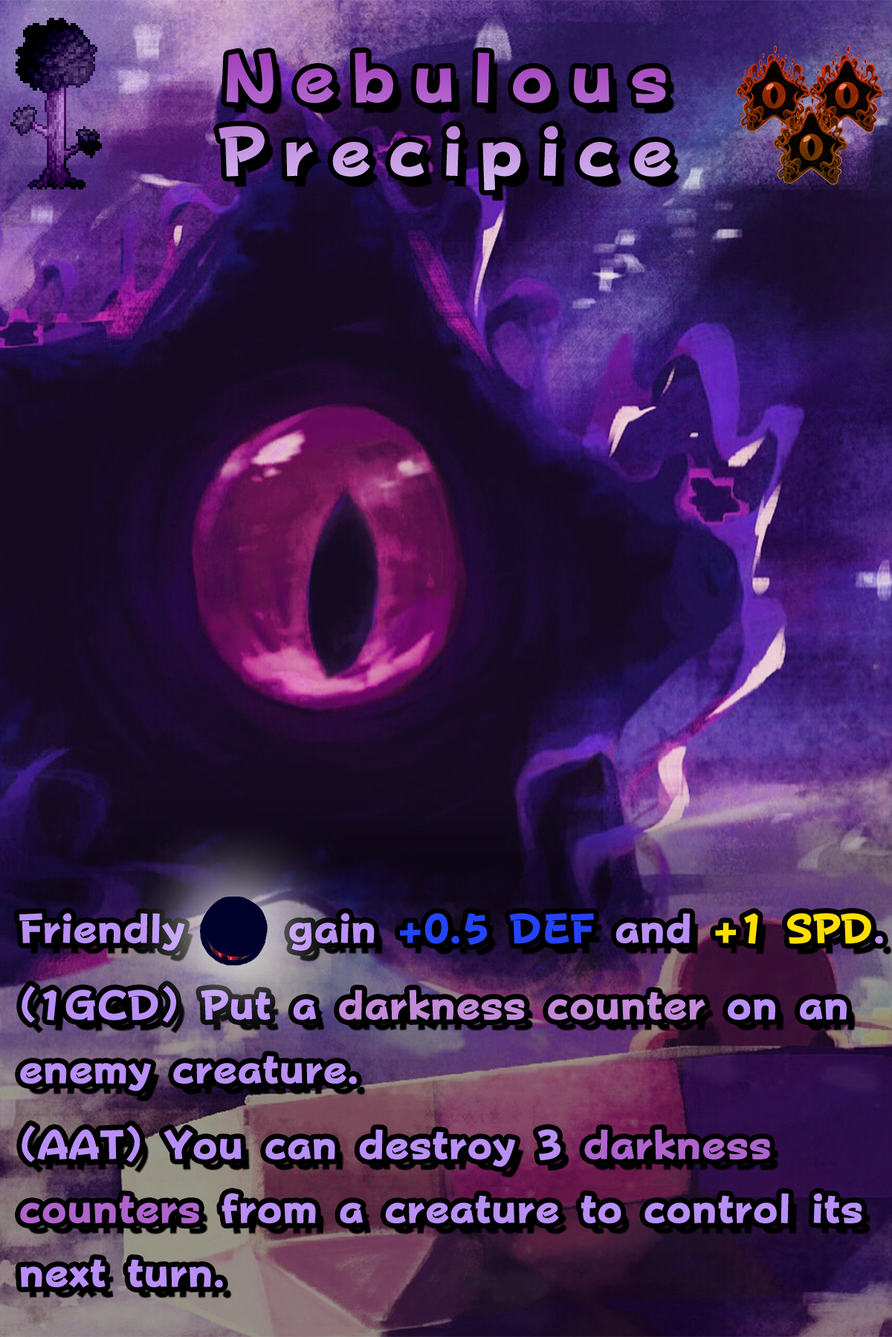
<style>
.page{position:relative;width:892px;height:1337px}
.page>*{position:absolute;margin:0}
.t1{font:118.9px/73.6px "FOTPopHappinessStrp-ExtraBold";letter-spacing:0.24em}
.t2{font:70.6px/63.9px "FOTPopHappinessStrp-ExtraBold";color:#b88ff6}
.t3{font:70.6px/63.9px "FOTPopHappinessStrp-ExtraBold";color:#2443ff}
.t4{font:70.6px/63.9px "FOTPopHappinessStrp-ExtraBold";color:#ffde00}
.t5{font:70.6px/76.5px "FOTPopHappinessStrp-ExtraBold";color:#b88ff6}
.t6{font:70.6px/76.5px "FOTPopHappinessStrp-ExtraBold";color:#c28ad8}
.t7{font:70.6px/75.8px "FOTPopHappinessStrp-ExtraBold";color:#b88ff6}
.t8{font:70.6px/75.8px "FOTPopHappinessStrp-ExtraBold";color:#ae64cc}
.t9{font:70.6px/63.9px "FOTPopHappinessStrp-ExtraBold";color:#ae64cc}
</style>
<div class="page">
<p class="t1" style="left:218px;top:53px;width:454px;height:138px;text-align:center">Nebulous<br>Precipice</p>
<p class="t2" style="left:19px;top:913px;width:864px;height:375px">Friendly     gain <span class="t3">+0.5 DEF</span> and <span class="t4">+1 SPD</span>.<br><span class="t5">(1GCD) Put a </span><span class="t6">darkness counter </span><span class="t5">on </span>an enemy creature.<br><span class="t7">(AAT) You can destroy 3 </span><span class="t8">darkness </span><span class="t9">counters</span> from a creature to control its next turn.</p>
</div>
